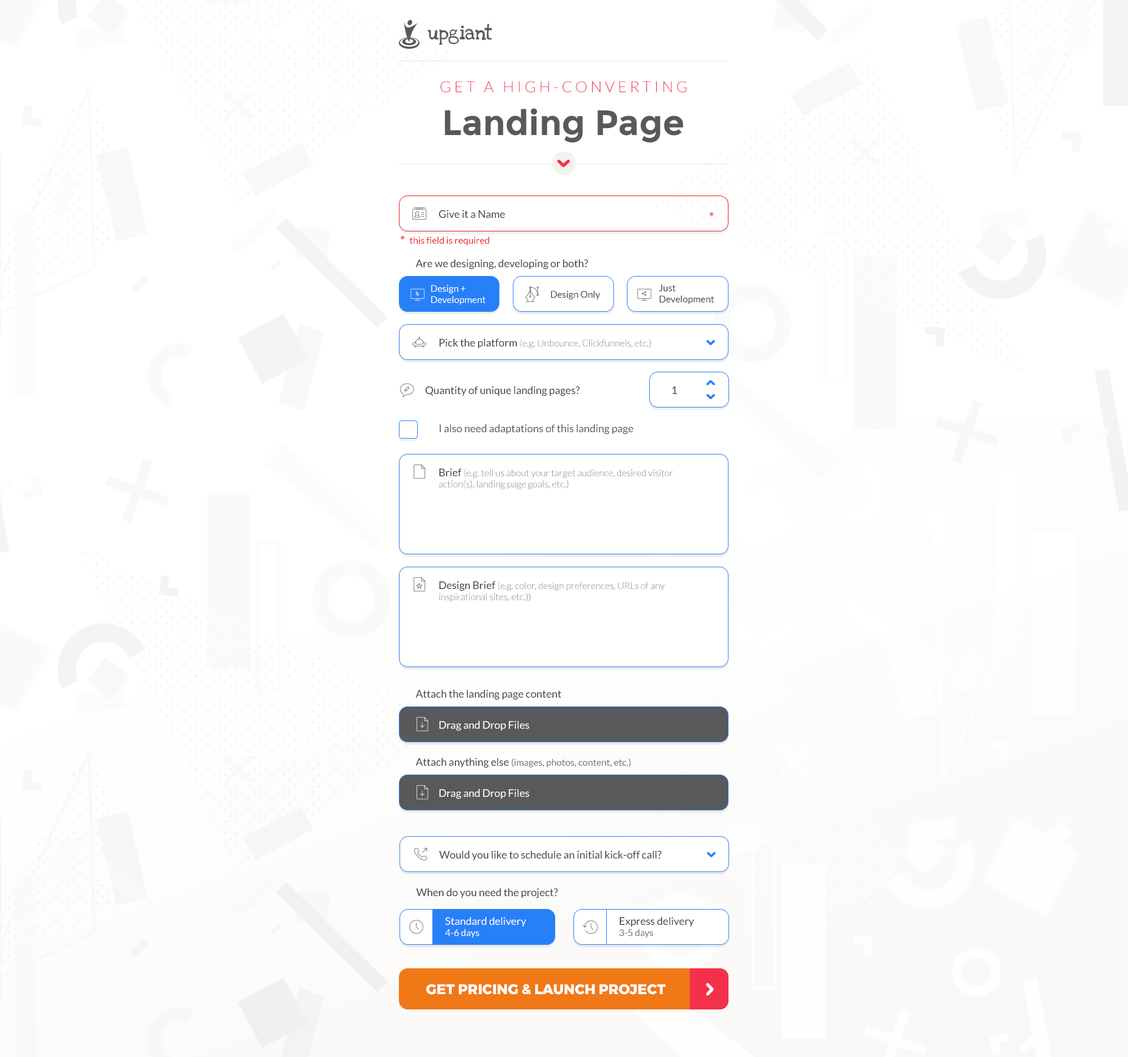
<style>
.page{position:relative;width:1128px;height:1057px;background:#ffffff}
.page>*{position:absolute;margin:0}
.t1{font:14.1px "LoveYaLikeASisterSolid";color:#58595b}
.t2{font:15.3px "Lato-Light";color:#f4314a;text-transform:uppercase}
.t3{font:35.2px "Montserrat-Bold";color:#58595b}
.t4{font:10.6px "Lato-Regular";color:#414042}
.t5{font:14.1px "Lato-Regular";color:#ed1c24}
.t6{font:9.4px "Lato-Regular";color:#ed1c24}
.t7{font:9.4px "Lato-Regular";color:#ffffff}
.t8{font:9.4px "Lato-Regular";color:#414042}
.t9{font:9.4px "Lato-Light";color:#6d6e71}
.t10{font:10.6px "Lato-Regular";color:#58595b}
.t11{font:10.6px "Lato-Regular";color:#ffffff}
.t12{font:9.4px "Lato-Regular";color:#6d6e71}
.t13{font:10.6px "Lato-Regular";color:#fbfafa}
.t14{font:9.4px "Lato-Regular";color:#fbfafa}
.t15{font:14.1px "Montserrat-ExtraBold";color:#ffffff}
</style>
<div class="page">
<p class="t1" style="left:428px;top:23px;width:64px;height:22px">upgiant</p>
<p class="t2" style="left:441px;top:81px;width:246px;height:12px">G E T   A   H I G H - C O N V E R T I N G</p>
<p class="t3" style="left:445px;top:108px;width:238px;height:35px">Landing Page</p>
<p class="t4" style="left:439px;top:210px;width:66px;height:9px">Give it a Name</p>
<p class="t5" style="left:709px;top:211px;width:5px;height:6px">*</p>
<p class="t6" style="left:400px;top:235px;width:89px;height:11px"><span class="t5">* </span>this field is required</p>
<p class="t4" style="left:415px;top:259px;width:173px;height:11px">Are we designing, developing or both?</p>
<p class="t7" style="left:431px;top:285px;width:55px;height:20px">Design + <br>Development</p>
<p class="t8" style="left:551px;top:291px;width:49px;height:9px">Design Only</p>
<p class="t8" style="left:659px;top:284px;width:55px;height:20px">Just<br>Development</p>
<p class="t9" style="left:439px;top:338px;width:212px;height:10px"><span class="t4">Pick the platform </span>(e.g. Unbounce, Clickfunnels, etc.)</p>
<p class="t4" style="left:425px;top:386px;width:155px;height:10px">Quantity of unique landing pages?</p>
<p class="t4" style="left:672px;top:387px;width:5px;height:7px">1</p>
<p class="t10" style="left:439px;top:424px;width:194px;height:11px">I also need adaptations of this landing page</p>
<p class="t9" style="left:439px;top:468px;width:234px;height:21px"><span class="t4">Brief </span>(e.g. tell us about your target audience, desired visitor <br>action(s), landing page goals, etc.)</p>
<p class="t9" style="left:439px;top:581px;width:225px;height:21px"><span class="t4">Design Brief </span>(e.g. color, design preferences, URLs of any <br>inspirational sites, etc.))</p>
<p class="t4" style="left:415px;top:690px;width:147px;height:10px">Attach the landing page content</p>
<p class="t11" style="left:439px;top:721px;width:90px;height:10px">Drag and Drop Files</p>
<p class="t12" style="left:415px;top:758px;width:216px;height:10px"><span class="t4">Attach anything else </span>(images, photos, content, etc.)</p>
<p class="t11" style="left:439px;top:789px;width:90px;height:10px">Drag and Drop Files</p>
<p class="t4" style="left:439px;top:851px;width:222px;height:10px">Would you like to schedule an initial kick-off call?</p>
<p class="t4" style="left:416px;top:888px;width:142px;height:11px">When do you need the project?</p>
<p class="t13" style="left:445px;top:917px;width:81px;height:21px">Standard delivery<br><span class="t14">4-6 days</span></p>
<p class="t4" style="left:619px;top:917px;width:75px;height:21px">Express delivery<br><span class="t12">3-5 days</span></p>
<p class="t15" style="left:426px;top:984px;width:240px;height:11px">GET PRICING &amp; LAUNCH PROJECT</p>
</div>
